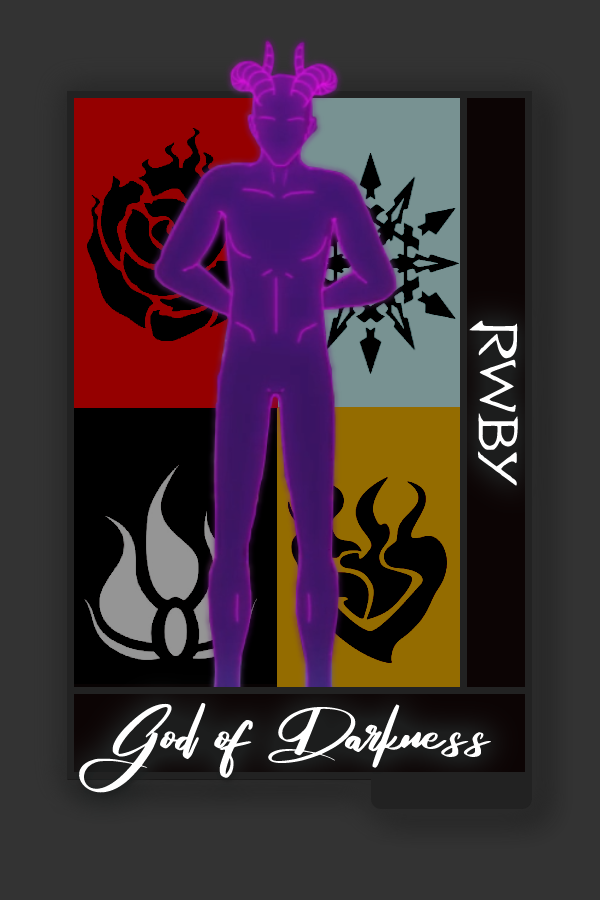
<style>
.page{position:relative;width:600px;height:900px;background:#333333}
.page>*{position:absolute;margin:0}
.t1{font:61.3px "RWBY_Style";color:#ffffff;scale:1.25 1}
.t2{font:75px "RosegaFREE";color:#ffffff}
</style>
<div class="page">
<p class="t1" style="left:469px;top:320px;width:49px;height:166px;rotate:90deg">RWBY</p>
<p class="t2" style="left:60px;top:697px;width:431px;height:116px">God of Darkness</p>
</div>
